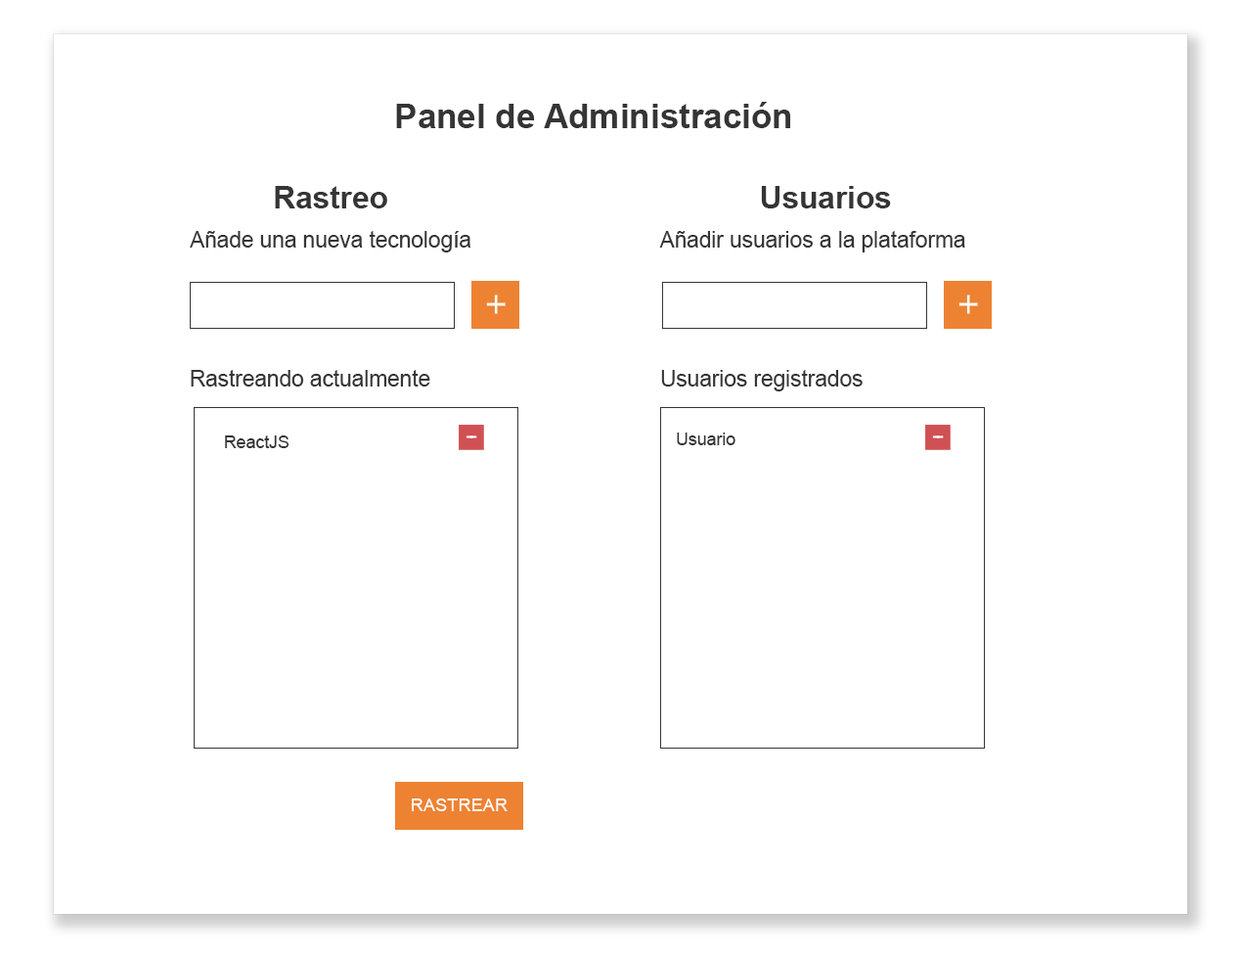
<style>
.page{position:relative;width:1245px;height:958px;background:#ffffff}
.page>*{position:absolute;margin:0}
.t1{font:34.3px "Arial-BoldMT";color:#353535}
.t2{font:30.9px "Arial-BoldMT";color:#353535}
.t3{font:22.1px "ArialMT";color:#353535}
.t4{font:17.4px "ArialMT";color:#353535}
</style>
<div class="page">
<p class="t1" style="left:396px;top:102px;width:394px;height:26px">Panel de Administración</p>
<p class="t2" style="left:275px;top:186px;width:112px;height:22px">Rastreo</p>
<p class="t2" style="left:761px;top:186px;width:130px;height:22px">Usuarios</p>
<p class="t3" style="left:190px;top:231px;width:280px;height:21px">Añade una nueva tecnología</p>
<p class="t3" style="left:659px;top:231px;width:306px;height:21px">Añadir usuarios a la plataforma</p>
<p class="t3" style="left:191px;top:370px;width:239px;height:16px">Rastreando actualmente</p>
<p class="t3" style="left:661px;top:370px;width:202px;height:21px">Usuarios registrados</p>
<p class="t4" style="left:225px;top:435px;width:65px;height:13px">ReactJS</p>
<p class="t4" style="left:677px;top:432px;width:59px;height:13px">Usuario</p>
</div>
